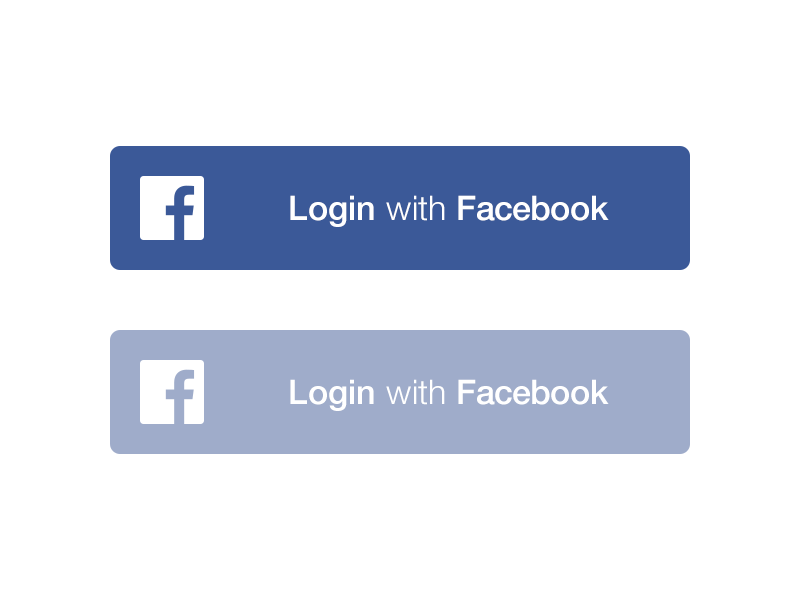
<style>
.page{position:relative;width:800px;height:600px;background:#ffffff}
.page>*{position:absolute;margin:0}
.t1{font:34px "HelveticaNeue-Medium";color:#ffffff}
.t2{font:34px "HelveticaNeue-Light";color:#ffffff}
</style>
<div class="page">
<p class="t1" style="left:290px;top:195px;width:319px;height:32px">Login <span class="t2">with</span> Facebook</p>
<p class="t1" style="left:290px;top:379px;width:319px;height:32px">Login <span class="t2">with</span> Facebook</p>
</div>
